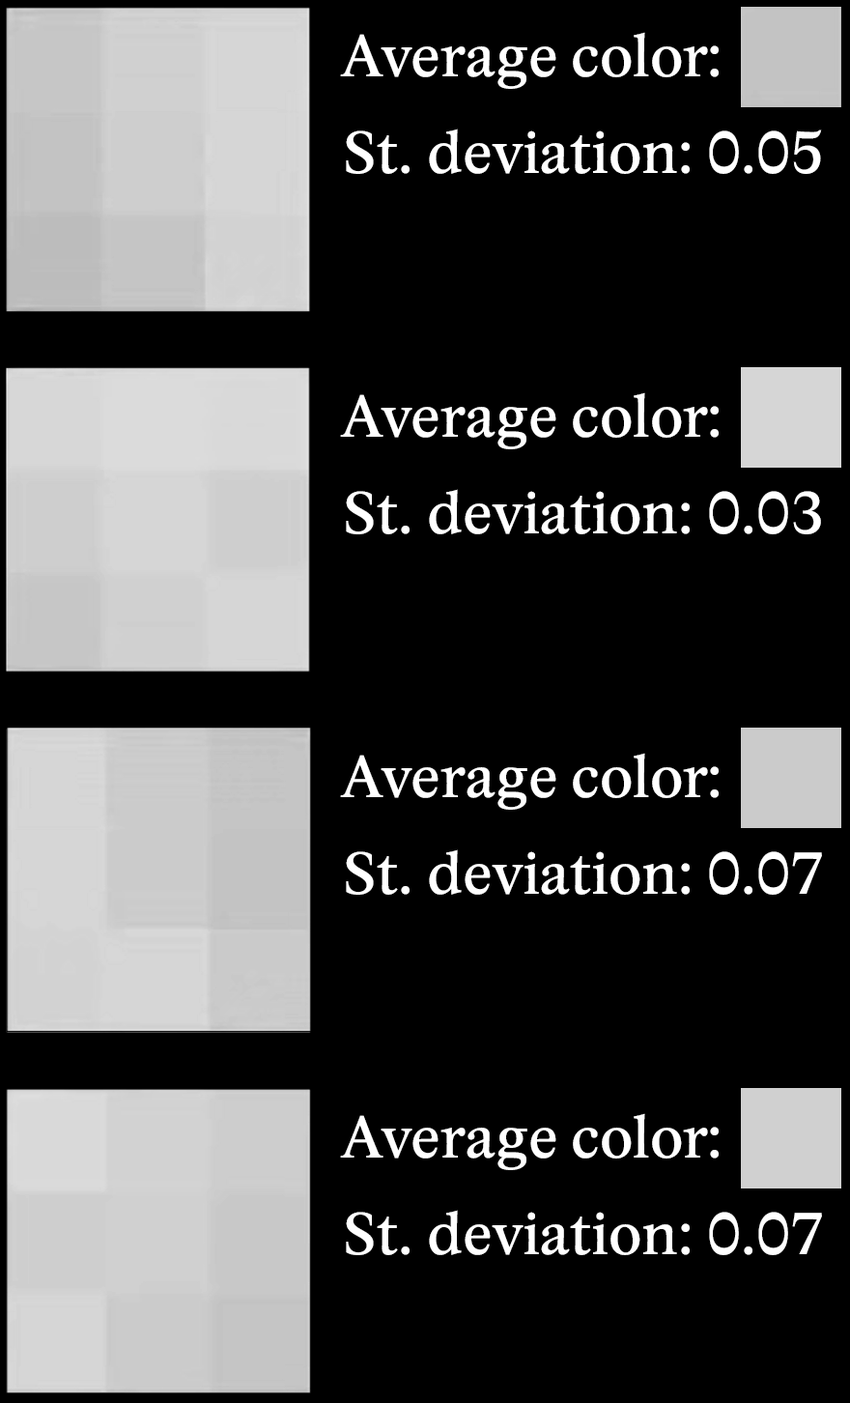
<style>
.page{position:relative;width:850px;height:1403px;background:#000000}
.page>*{position:absolute;margin:0}
.t1{font:59.3px/96.6px "Academica";color:#ffffff}
</style>
<div class="page">
<p class="t1" style="left:340px;top:32px;width:482px;height:142px">Average color:<br>St. deviation: 0.05</p>
<p class="t1" style="left:340px;top:392px;width:481px;height:142px">Average color:<br>St. deviation: 0.03</p>
<p class="t1" style="left:340px;top:753px;width:482px;height:142px">Average color:<br>St. deviation: 0.07</p>
<p class="t1" style="left:340px;top:1113px;width:482px;height:142px">Average color:<br>St. deviation: 0.07</p>
</div>
